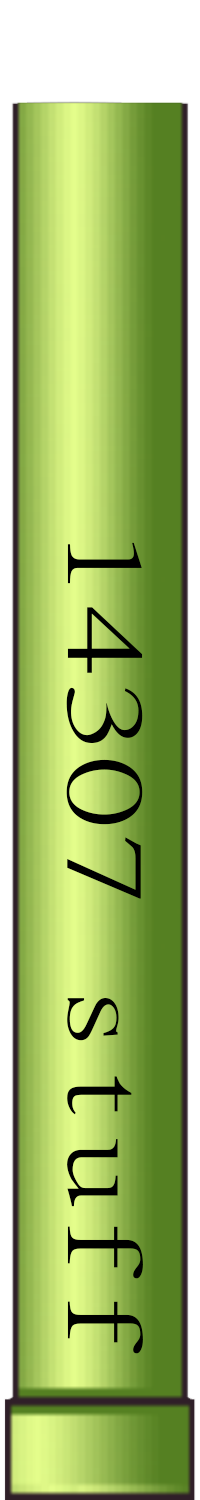
<style>
.page{position:relative;width:200px;height:1500px}
.page>*{position:absolute;margin:0}
.t1{font:100.9px "MingLiU-ExtB";color:#000000;scale:1.5 1}
</style>
<div class="page">
<p class="t1" style="left:66px;top:542px;width:77px;height:812px;rotate:90deg">14307 stuff</p>
</div>
